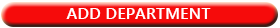
<style>
.page{position:relative;width:280px;height:28px;background:#f60b0b}
.page>*{position:absolute;margin:0}
.t1{font:16.4px "YuGothicUI-Bold";color:#ffffff}
</style>
<div class="page">
<p class="t1" style="left:66px;top:8px;width:145px;height:11px">ADD DEPARTMENT</p>
</div>
